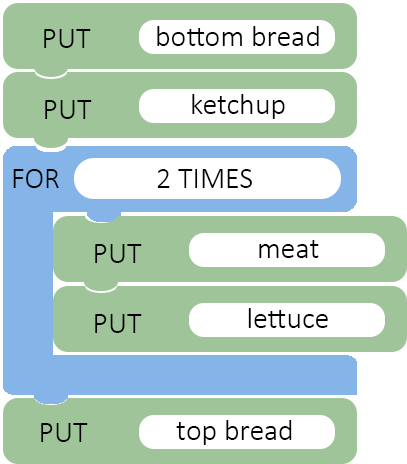
<style>
.page{position:relative;width:407px;height:464px;background:#a0c49a}
.page>*{position:absolute;margin:0}
.t1{font:30px "Calibri-Light";color:#000000}
</style>
<div class="page">
<p class="t1" style="left:44px;top:29px;width:47px;height:19px">PUT</p>
<p class="t1" style="left:157px;top:26px;width:162px;height:20px">bottom bread</p>
<p class="t1" style="left:45px;top:100px;width:47px;height:19px">PUT</p>
<p class="t1" style="left:192px;top:94px;width:93px;height:25px">ketchup</p>
<p class="t1" style="left:13px;top:169px;width:46px;height:19px">FOR</p>
<p class="t1" style="left:157px;top:169px;width:95px;height:19px">2 TIMES</p>
<p class="t1" style="left:95px;top:244px;width:47px;height:19px">PUT</p>
<p class="t1" style="left:259px;top:240px;width:60px;height:18px">meat</p>
<p class="t1" style="left:95px;top:314px;width:47px;height:19px">PUT</p>
<p class="t1" style="left:248px;top:308px;width:80px;height:20px">lettuce</p>
<p class="t1" style="left:41px;top:423px;width:47px;height:19px">PUT</p>
<p class="t1" style="left:176px;top:420px;width:116px;height:25px">top bread</p>
</div>
